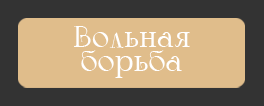
<style>
.page{position:relative;width:264px;height:106px;background:#e0bd8b}
.page>*{position:absolute;margin:0}
.t1{font:30px/24px "Calypso-Regular";color:#ffffff}
</style>
<div class="page">
<p class="t1" style="left:74px;top:26px;width:116px;height:52px;text-align:center">Вольная<br>борьба</p>
</div>
